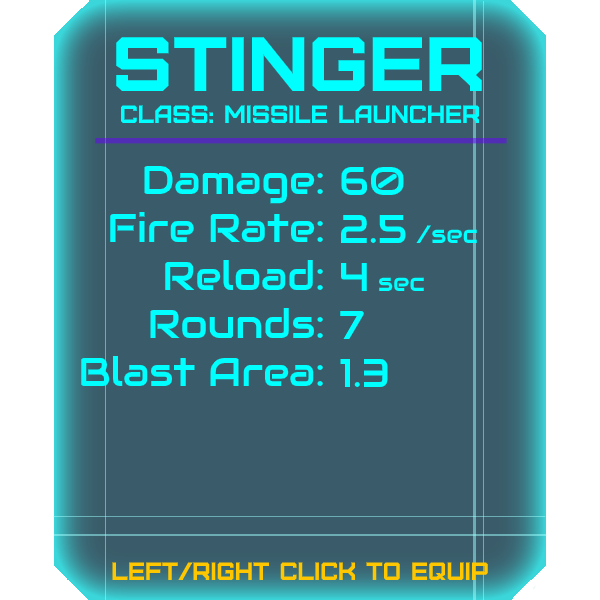
<style>
.page{position:relative;width:600px;height:600px;background:#3a5c6a}
.page>*{position:absolute;margin:0}
.t1{font:76.8px "Furore";color:#00ffff;scale:1.08 1}
.t2{font:25px "Furore";color:#00ffff}
.t3{font:40px "Audiowide-Regular";color:#00ffff}
.t4{font:25px "Audiowide-Regular";color:#00ffff}
.t5{font:25px "Furore";color:#ffc700}
</style>
<div class="page">
<p class="t1" style="left:116px;top:37px;width:366px;height:54px">stinger</p>
<p class="t2" style="left:120px;top:105px;width:360px;height:18px">Class: missile launcher</p>
<p class="t3" style="left:81px;top:165px;width:242px;height:221px;text-align:right">Damage:<br>Fire Rate:<br>Reload:<br>Rounds:<br>Blast Area:</p>
<p class="t3" style="left:340px;top:166px;width:137px;height:221px">60<br>2.5 <span class="t4">/sec<br></span>4 <span class="t4">sec<br></span>7<br>1.3</p>
<p class="t5" style="left:112px;top:562px;width:376px;height:18px">left/right click to equip</p>
</div>
